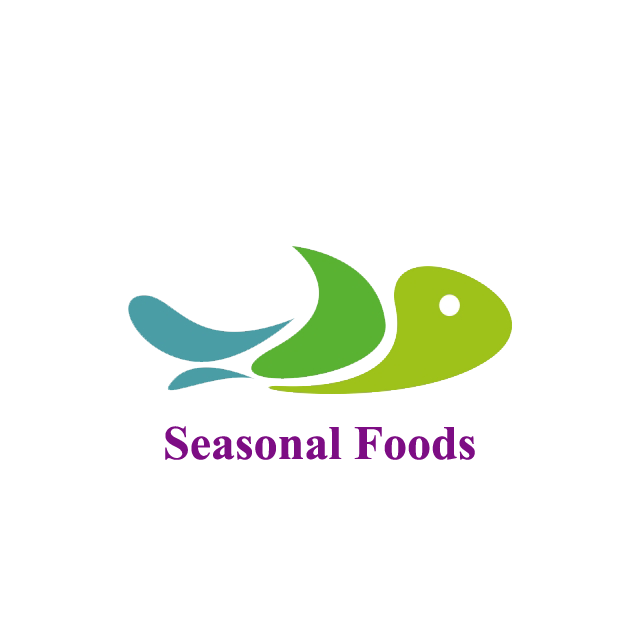
<style>
.page{position:relative;width:640px;height:640px;background:#ffffff}
.page>*{position:absolute;margin:0}
.t1{font:48px "TimesNewRomanPS-BoldMT";color:#7d0d84}
</style>
<div class="page">
<p class="t1" style="left:165px;top:426px;width:310px;height:34px">Seasonal Foods</p>
</div>
